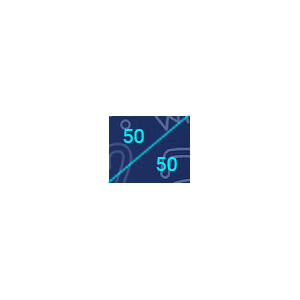
<style>
.page{position:relative;width:300px;height:300px;background:#ffffff}
.page>*{position:absolute;margin:0}
.t1{font:20px "Roboto-Regular";color:#00f2ff}
</style>
<div class="page">
<p class="t1" style="left:123px;top:129px;width:21px;height:14px">50</p>
<p class="t1" style="left:156px;top:157px;width:21px;height:14px">50</p>
</div>
